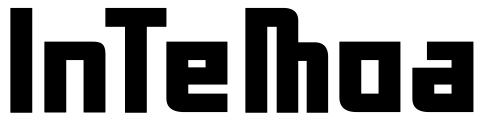
<style>
.page{position:relative;width:480px;height:120px;background:#ffffff}
.page>*{position:absolute;margin:0}
.t1{font:140.9px "KoreanCOMC-Regular-KSCpc-EUC-H";letter-spacing:-0.12em;color:#000000;font-weight:bold}
.t2{font:140.9px "KoreanCOMC-Regular-KSCpc-EUC-H";letter-spacing:-0.2em;color:#000000;font-weight:bold}
.t3{font:140.9px "KoreanCOMC-Regular-KSCpc-EUC-H";letter-spacing:-0.08em;color:#000000;font-weight:bold}
</style>
<div class="page">
<p class="t1" style="left:10px;top:7px;width:464px;height:106px">I<span class="t2">nT</span><span class="t3">e</span>Moa</p>
</div>
